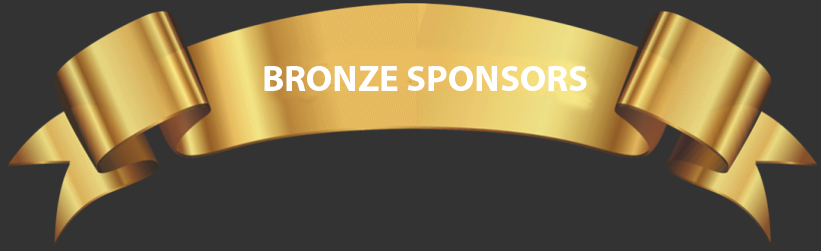
<style>
.page{position:relative;width:821px;height:251px;background:#333333}
.page>*{position:absolute;margin:0}
.t1{font:37px "MyriadPro-Bold";color:#ffffff}
</style>
<div class="page">
<p class="t1" style="left:264px;top:66px;width:323px;height:25px">BRONZE SPONSORS</p>
</div>
